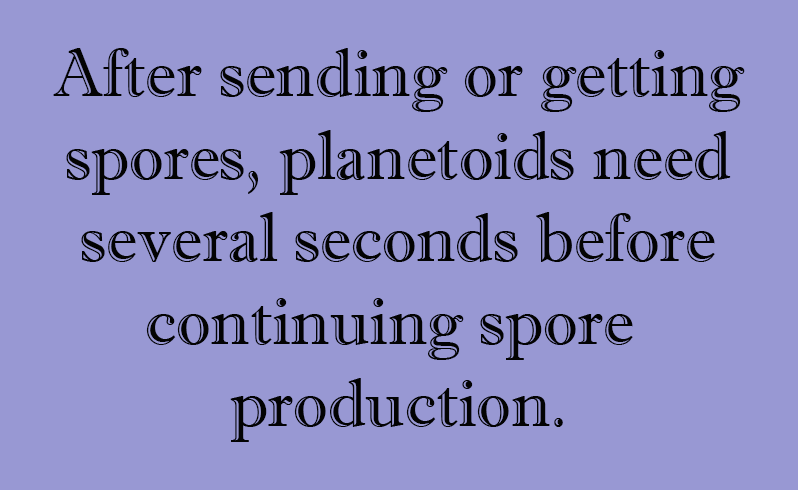
<style>
.page{position:relative;width:798px;height:490px;background:#9898d3}
.page>*{position:absolute;margin:0}
.t1{font:68.7px "ImprintMT-Shadow";color:#030303}
</style>
<div class="page">
<p class="t1" style="left:53px;top:48px;width:692px;height:394px;text-align:center">After sending or getting<br>spores, planetoids need<br>several seconds before<br>continuing spore <br>production.</p>
</div>
